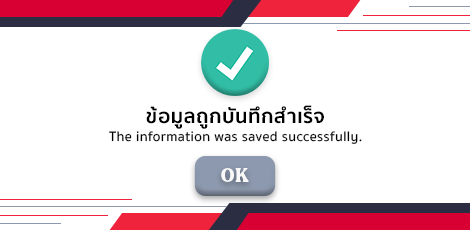
<style>
.page{position:relative;width:470px;height:230px;background:#ffffff}
.page>*{position:absolute;margin:0}
.t1{font:20px "SukhumvitSet-Bold";letter-spacing:0.025em;color:#000000}
.t2{font:14px "SukhumvitSet-Medium";letter-spacing:0.025em;color:#000000}
.t3{font:18px "MADEDillan";letter-spacing:0.025em;color:#f9f9f9}
</style>
<div class="page">
<p class="t1" style="left:146px;top:105px;width:178px;height:24px">ข้อมูลถูกบันทึกสำเร็จ</p>
<p class="t2" style="left:109px;top:131px;width:253px;height:13px">The information was saved successfully.</p>
<p class="t3" style="left:221px;top:168px;width:28px;height:14px">OK</p>
</div>
